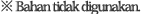
<style>
.page{position:relative;width:143px;height:14px;background:#ffffff}
.page>*{position:absolute;margin:0}
.t1{font:14px "HeiseiMinStd-W7";letter-spacing:-0.08em}
</style>
<div class="page">
<p class="t1" style="left:1px;top:0px;width:140px;height:15px">※ Bahan tidak digunakan.</p>
</div>
